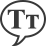
<style>
.page{position:relative;width:46px;height:46px;background:#ffffff}
.page>*{position:absolute;margin:0}
.t1{font:28px "TimesNewRomanPS-BoldMT";color:#383838;text-transform:uppercase}
.t2{font:28px "TimesNewRomanPS-BoldMT";color:#383838;font-variant:small-caps}
</style>
<div class="page">
<p class="t1" style="left:7px;top:9px;width:32px;height:20px">T<span class="t2">t</span></p>
</div>
